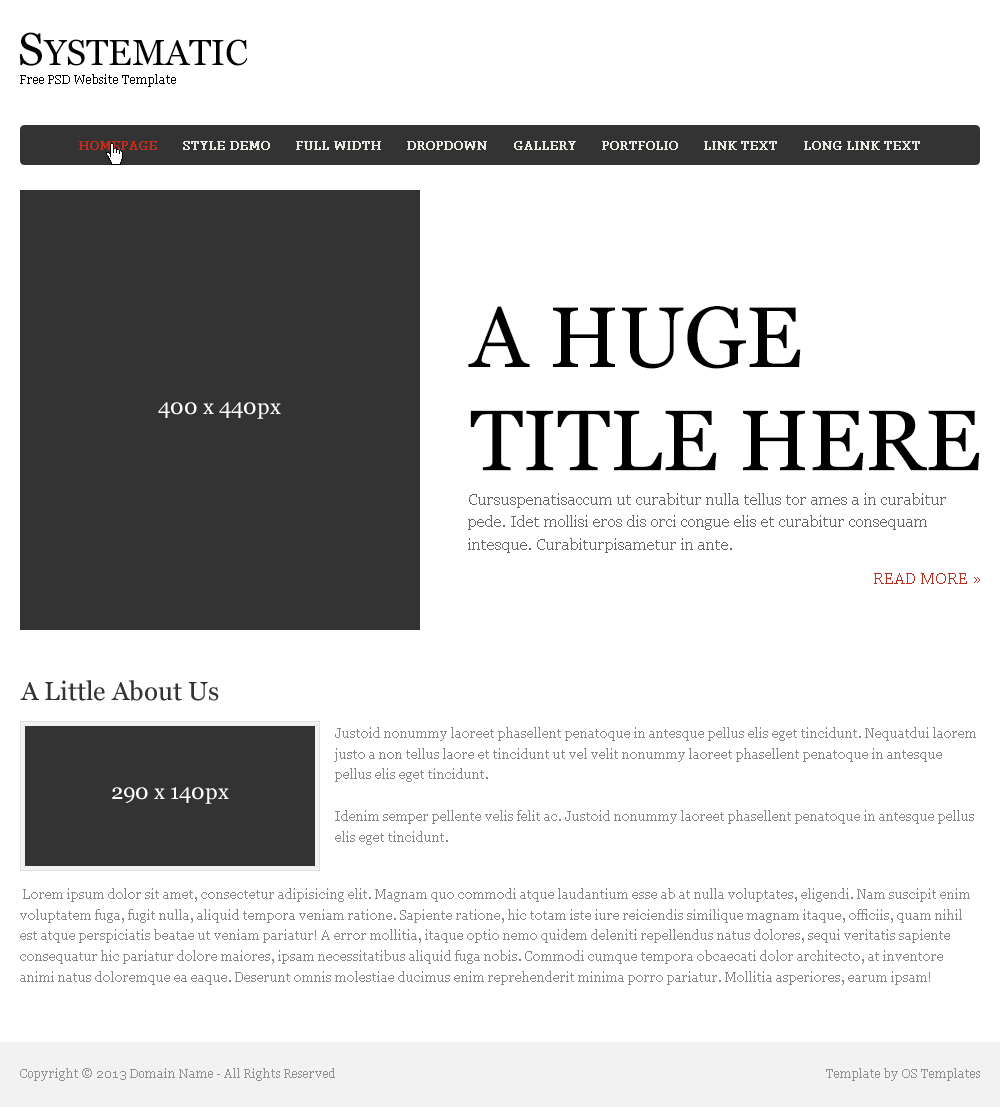
<style>
.page{position:relative;width:1000px;height:1107px;background:#ffffff}
.page>*{position:absolute;margin:0}
.t1{font:36px "Georgia";color:#000000}
.t2{font:46px "Georgia";color:#000000}
.t3{font:12px "Georgia";color:#000000}
.t4{font:12px "Georgia";color:#ba2e1f;font-weight:bold}
.t5{font:12px "Georgia";color:#e9e8e3;font-weight:bold}
.t6{font:86px/103.2px "Georgia";color:#000000}
.t7{font:22px "Georgia";color:#ffffff}
.t8{font:16px/22.4px "Georgia";color:#666666}
.t9{font:16px "Georgia";color:#ba2e1f}
.t10{font:26px "Georgia";color:#333333}
.t11{font:13px/20.8px "Georgia";color:#878787}
.t12{font:12px "Georgia";color:#919191}
</style>
<div class="page">
<p class="t1" style="left:20px;top:32px;width:228px;height:34px"><span class="t2">S</span>YSTEMATIC</p>
<p class="t3" style="left:20px;top:74px;width:156px;height:13px">Free PSD Website Template</p>
<p class="t4" style="left:79px;top:141px;width:78px;height:9px">HOMEPAGE</p>
<p class="t5" style="left:183px;top:141px;width:87px;height:9px">STYLE DEMO</p>
<p class="t5" style="left:296px;top:141px;width:85px;height:9px">FULL WIDTH</p>
<p class="t5" style="left:407px;top:141px;width:80px;height:9px">DROPDOWN</p>
<p class="t5" style="left:514px;top:141px;width:62px;height:9px">GALLERY</p>
<p class="t5" style="left:602px;top:141px;width:76px;height:9px">PORTFOLIO</p>
<p class="t5" style="left:704px;top:141px;width:73px;height:9px">LINK TEXT</p>
<p class="t5" style="left:804px;top:141px;width:116px;height:9px">LONG LINK TEXT</p>
<p class="t6" style="left:468px;top:306px;width:512px;height:165px">A HUGE TITLE HERE</p>
<p class="t7" style="left:158px;top:402px;width:123px;height:17px">400 x 440px</p>
<p class="t8" style="left:468px;top:493px;width:478px;height:60px">Cursuspenatisaccum ut curabitur nulla tellus tor ames a in curabitur pede. Idet mollisi eros dis orci congue elis et curabitur consequam intesque. Curabiturpisametur in ante.</p>
<p class="t9" style="left:874px;top:573px;width:106px;height:11px">READ MORE »</p>
<p class="t10" style="left:20px;top:680px;width:199px;height:21px">A Little About Us</p>
<p class="t11" style="left:334px;top:727px;width:642px;height:118px">Justoid nonummy laoreet phasellent penatoque in antesque pellus elis eget tincidunt. Nequatdui laorem justo a non tellus laore et tincidunt ut vel velit nonummy laoreet phasellent penatoque in antesque pellus elis eget tincidunt.<br><br>Idenim semper pellente velis felit ac. Justoid nonummy laoreet phasellent penatoque in antesque pellus elis eget tincidunt.</p>
<p class="t7" style="left:112px;top:787px;width:117px;height:17px">290 x 140px</p>
<p class="t11" style="left:20px;top:888px;width:950px;height:97px">Lorem ipsum dolor sit amet, consectetur adipisicing elit. Magnam quo commodi atque laudantium esse ab at nulla voluptates, eligendi. Nam suscipit enim voluptatem fuga, fugit nulla, aliquid tempora veniam ratione. Sapiente ratione, hic totam iste iure reiciendis similique magnam itaque, officiis, quam nihil est atque perspiciatis beatae ut veniam pariatur! A error mollitia, itaque optio nemo quidem deleniti repellendus natus dolores, sequi veritatis sapiente consequatur hic pariatur dolore maiores, ipsam necessitatibus aliquid fuga nobis. Commodi cumque tempora obcaecati dolor architecto, at inventore animi natus doloremque ea eaque. Deserunt omnis molestiae ducimus enim reprehenderit minima porro pariatur. Mollitia asperiores, earum ipsam!</p>
<p class="t12" style="left:20px;top:1068px;width:315px;height:13px">Copyright © 2013 Domain Name - All Rights Reserved</p>
<p class="t12" style="left:826px;top:1068px;width:154px;height:13px">Template by OS Templates</p>
</div>
